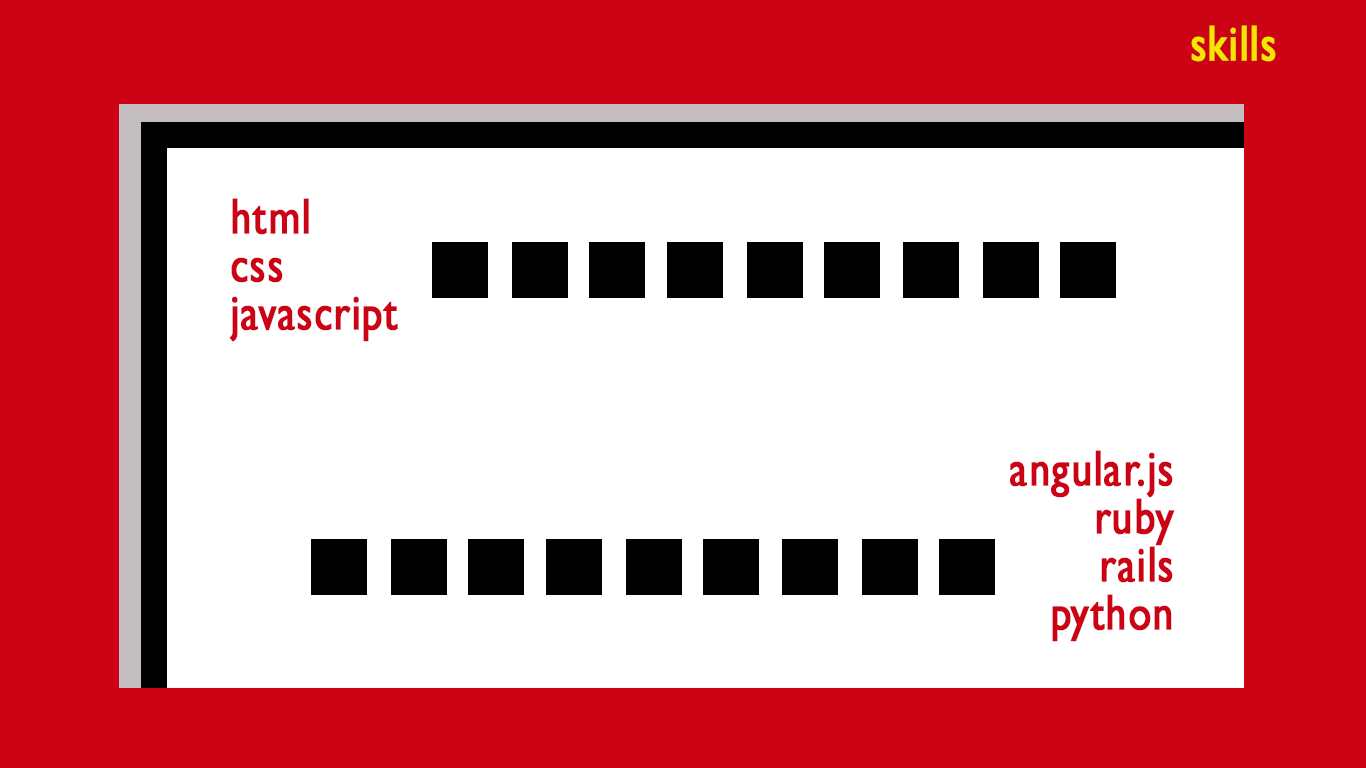
<style>
.page{position:relative;width:1366px;height:768px;background:#ffffff}
.page>*{position:absolute;margin:0}
.t1{font:50.4px "GillSansMT";letter-spacing:0.01em;color:#f3e504;font-weight:bold;scale:0.81 1}
.t2{font:50.4px/16px "GillSansMT";letter-spacing:0.01em;color:#cc0215;font-weight:bold;scale:0.81 1}
</style>
<div class="page">
<p class="t1" style="left:1191px;top:25px;width:85px;height:37px">skills</p>
<p class="t2" style="left:229px;top:198px;width:169px;height:144px">html<br><br><br>css<br><br><br>javascript</p>
<p class="t2" style="left:1010px;top:450px;width:165px;height:192px;text-align:right">angular.js<br><br><br>ruby<br><br><br>rails<br><br><br>python</p>
</div>
